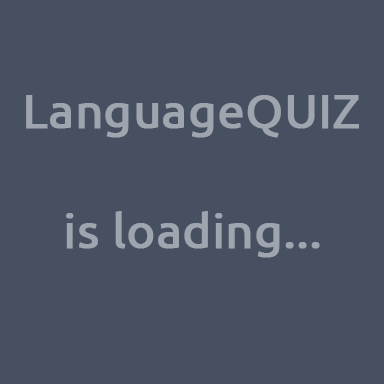
<style>
.page{position:relative;width:384px;height:384px;background:#465060}
.page>*{position:absolute;margin:0}
.t1{font:48px "Ubuntu";color:#9fa5af;font-weight:bold}
</style>
<div class="page">
<p class="t1" style="left:26px;top:95px;width:333px;height:43px">LanguageQUIZ</p>
<p class="t1" style="left:66px;top:211px;width:254px;height:47px">is loading...</p>
</div>
